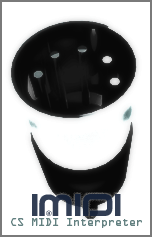
<style>
.page{position:relative;width:152px;height:237px;background:#ffffff}
.page>*{position:absolute;margin:0}
.t1{font:27px "AmalgamR"}
.t2{font:10px "OCRAStd";color:#648181}
</style>
<div class="page">
<p class="t1" style="left:32px;top:194px;width:89px;height:22px">IMIDI</p>
<p class="t2" style="left:11px;top:218px;width:131px;height:10px">CS MIDI Interpreter</p>
</div>
